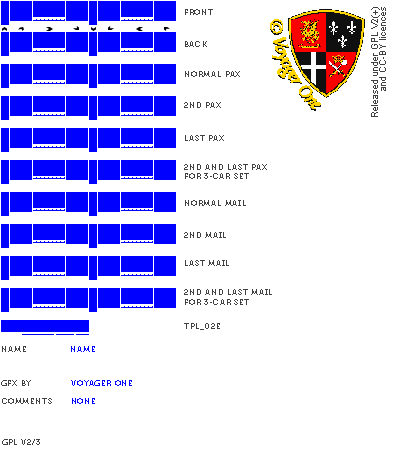
<style>
.page{position:relative;width:400px;height:450px;background:#ffffff}
.page>*{position:absolute;margin:0}
.t1{font:8px "Museo700-Regular";letter-spacing:0.075em;color:#404040;text-transform:uppercase}
.t2{font:8px "Museo700-Regular";letter-spacing:0.075em;color:#0000ff;text-transform:uppercase}
</style>
<div class="page">
<p class="t1" style="left:185px;top:9px;width:28px;height:6px">front</p>
<p class="t1" style="left:185px;top:41px;width:22px;height:6px">back</p>
<p class="t1" style="left:185px;top:71px;width:55px;height:6px">normal pax</p>
<p class="t1" style="left:184px;top:102px;width:37px;height:6px">2nd pax</p>
<p class="t1" style="left:185px;top:135px;width:39px;height:6px">last pax</p>
<p class="t1" style="left:184px;top:164px;width:83px;height:15px">2nd and last pax<br>for 3-car set</p>
<p class="t1" style="left:185px;top:200px;width:61px;height:6px">normal mail</p>
<p class="t1" style="left:184px;top:232px;width:42px;height:6px">2nd mail</p>
<p class="t1" style="left:185px;top:260px;width:44px;height:6px">last mail</p>
<p class="t1" style="left:184px;top:289px;width:88px;height:16px">2nd and last mail<br>for 3-car set</p>
<p class="t1" style="left:184px;top:323px;width:36px;height:7px">tpl_02e</p>
<p class="t1" style="left:2px;top:346px;width:24px;height:6px">name</p>
<p class="t2" style="left:71px;top:346px;width:24px;height:6px">name</p>
<p class="t1" style="left:1px;top:380px;width:30px;height:6px">gfx by</p>
<p class="t2" style="left:71px;top:380px;width:61px;height:6px">voyager one</p>
<p class="t1" style="left:2px;top:398px;width:50px;height:6px">comments</p>
<p class="t2" style="left:72px;top:398px;width:23px;height:6px">none</p>
<p class="t1" style="left:2px;top:439px;width:38px;height:6px">gpl v2/3</p>
</div>
